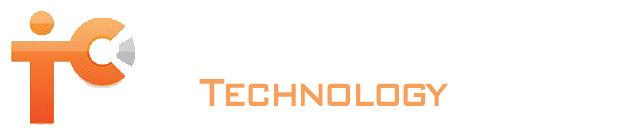
<style>
.page{position:relative;width:637px;height:132px;background:#ffffff}
.page>*{position:absolute;margin:0}
.t1{font:52.4px "BankGothicBold";letter-spacing:-0.05em;color:#f7a05c;scale:0.79 1}
.t2{font:52.4px "BankGothicBold";letter-spacing:-0.05em;color:#ffffff;scale:0.79 1}
</style>
<div class="page">
<p class="t1" style="left:199px;top:30px;width:430px;height:76px"><span class="t2">Idaho<br></span>Technology <span class="t2">Council</span></p>
</div>
